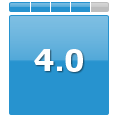
<style>
.page{position:relative;width:117px;height:117px;background:#2793cf}
.page>*{position:absolute;margin:0}
.t1{font:36px "Colaborate-Bold";color:#ffffff;text-transform:uppercase}
</style>
<div class="page">
<p class="t1" style="left:34px;top:49px;width:49px;height:23px">4.0</p>
</div>
